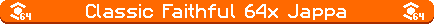
<style>
.page{position:relative;width:434px;height:24px;background:#ff6900}
.page>*{position:absolute;margin:0}
.t1{font:16px "Faithful32xRegular";color:#ffffff}
</style>
<div class="page">
<p class="t1" style="left:86px;top:4px;width:260px;height:16px">Classic Faithful 64x Jappa</p>
</div>
